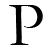
<style>
.page{position:relative;width:50px;height:50px;background:#ffffff}
.page>*{position:absolute;margin:0}
.t1{font:65px "Garamond";color:#000000}
</style>
<div class="page">
<p class="t1" style="left:9px;top:5px;width:34px;height:40px">P</p>
</div>
